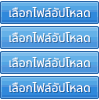
<style>
.page{position:relative;width:99px;height:100px}
.page>*{position:absolute;margin:0}
.t1{font:12px "NotoSansThai-Regular";color:#ffffff}
</style>
<div class="page">
<p class="t1" style="left:9px;top:7px;width:81px;height:10px">เลือกไฟล์อัปโหลด</p>
<p class="t1" style="left:9px;top:32px;width:81px;height:10px">เลือกไฟล์อัปโหลด</p>
<p class="t1" style="left:9px;top:57px;width:81px;height:10px">เลือกไฟล์อัปโหลด</p>
<p class="t1" style="left:9px;top:82px;width:81px;height:10px">เลือกไฟล์อัปโหลด</p>
</div>
